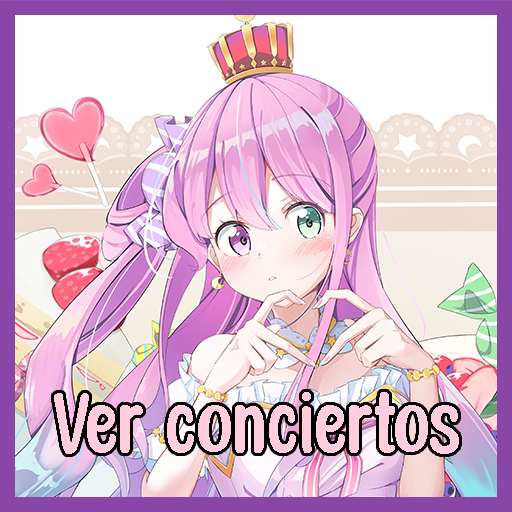
<style>
.page{position:relative;width:512px;height:512px}
.page>*{position:absolute;margin:0}
.t1{font:94.7px "HoneyNotes-Regular";color:#ffcddd}
</style>
<div class="page">
<p class="t1" style="left:54px;top:392px;width:405px;height:62px">Ver conciertos</p>
</div>
